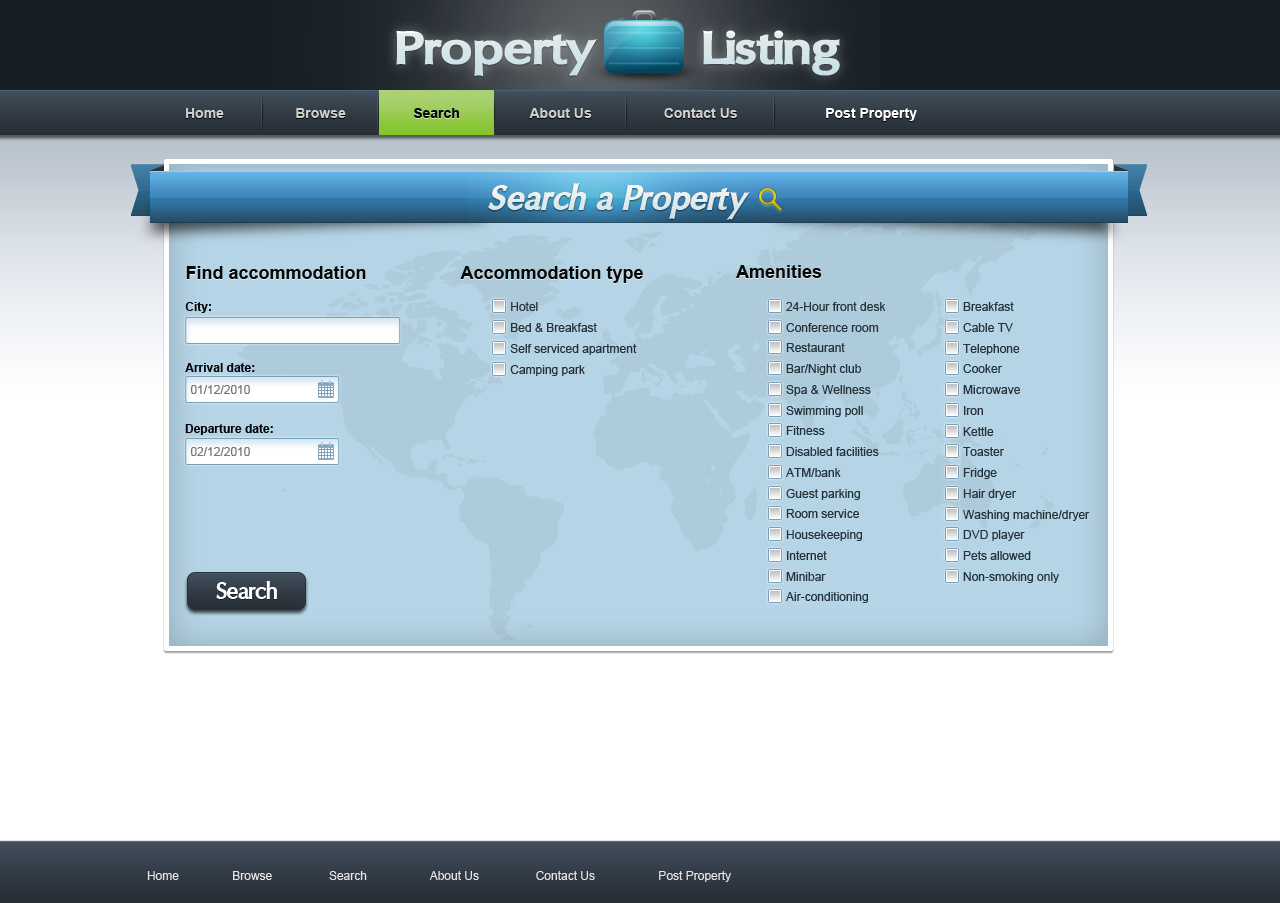
<style>
.page{position:relative;width:1280px;height:903px;background:#ffffff}
.page>*{position:absolute;margin:0}
.t1{font:48px "OregonLDOExtendedBlack";color:#d8e6ea}
.t2{font:14px "Arial-BoldMT";color:#cfcfcf}
.t3{font:14px "Arial-BoldMT";color:#070806}
.t4{font:14px "Arial-BoldMT";color:#ffffff}
.t5{font:36px "OregonLDOExtraBlack-Oblique";color:#e4ebeb}
.t6{font:18px "Arial-BoldMT";color:#070806}
.t7{font:12px "Arial-BoldMT";color:#010101}
.t8{font:12px "ArialMT";color:#26323a}
.t9{font:12px "ArialMT";color:#25323a}
.t10{font:12px "Arial-BoldMT";color:#000000}
.t11{font:12px "ArialMT";color:#787575}
.t12{font:24px "OregonLDOExtraBold";letter-spacing:-0.025em;color:#ffffff}
.t13{font:12px "ArialMT";color:#e5e4e4}
</style>
<div class="page">
<p class="t1" style="left:396px;top:30px;width:444px;height:46px">Property        Listing</p>
<p class="t2" style="left:186px;top:108px;width:38px;height:10px">Home</p>
<p class="t2" style="left:296px;top:108px;width:50px;height:10px">Browse</p>
<p class="t3" style="left:414px;top:108px;width:45px;height:10px">Search</p>
<p class="t2" style="left:529px;top:108px;width:63px;height:10px">About Us</p>
<p class="t2" style="left:664px;top:108px;width:73px;height:10px">Contact Us</p>
<p class="t4" style="left:826px;top:108px;width:91px;height:13px">Post Property</p>
<p class="t5" style="left:488px;top:183px;width:262px;height:37px">Search a Property</p>
<p class="t6" style="left:186px;top:266px;width:180px;height:13px">Find accommodation</p>
<p class="t6" style="left:460px;top:266px;width:183px;height:17px">Accommodation type</p>
<p class="t6" style="left:736px;top:265px;width:86px;height:13px">Amenities</p>
<p class="t7" style="left:185px;top:302px;width:26px;height:11px">City:</p>
<p class="t8" style="left:511px;top:302px;width:27px;height:9px">Hotel</p>
<p class="t9" style="left:786px;top:302px;width:100px;height:9px">24-Hour front desk</p>
<p class="t9" style="left:963px;top:302px;width:51px;height:9px">Breakfast</p>
<p class="t9" style="left:511px;top:323px;width:86px;height:9px">Bed &amp; Breakfast</p>
<p class="t9" style="left:786px;top:323px;width:93px;height:9px">Conference room</p>
<p class="t9" style="left:963px;top:323px;width:50px;height:9px">Cable TV</p>
<p class="t9" style="left:510px;top:344px;width:127px;height:11px">Self serviced apartment</p>
<p class="t9" style="left:786px;top:343px;width:59px;height:9px">Restaurant</p>
<p class="t9" style="left:963px;top:344px;width:57px;height:11px">Telephone</p>
<p class="t10" style="left:185px;top:363px;width:70px;height:9px">Arrival date:</p>
<p class="t9" style="left:510px;top:365px;width:75px;height:11px">Camping park</p>
<p class="t9" style="left:786px;top:364px;width:75px;height:11px">Bar/Night club</p>
<p class="t9" style="left:963px;top:364px;width:39px;height:9px">Cooker</p>
<p class="t11" style="left:190px;top:385px;width:60px;height:9px">01/12/2010</p>
<p class="t9" style="left:786px;top:385px;width:85px;height:11px">Spa &amp; Wellness</p>
<p class="t9" style="left:963px;top:385px;width:57px;height:9px">Microwave</p>
<p class="t9" style="left:786px;top:406px;width:77px;height:11px">Swimming poll</p>
<p class="t9" style="left:964px;top:406px;width:19px;height:9px">Iron</p>
<p class="t10" style="left:185px;top:424px;width:88px;height:11px">Departure date:</p>
<p class="t9" style="left:786px;top:426px;width:39px;height:9px">Fitness</p>
<p class="t9" style="left:963px;top:427px;width:31px;height:9px">Kettle</p>
<p class="t11" style="left:190px;top:447px;width:60px;height:9px">02/12/2010</p>
<p class="t9" style="left:786px;top:447px;width:93px;height:9px">Disabled facilities</p>
<p class="t9" style="left:963px;top:447px;width:41px;height:9px">Toaster</p>
<p class="t9" style="left:786px;top:468px;width:55px;height:9px">ATM/bank</p>
<p class="t9" style="left:963px;top:468px;width:34px;height:11px">Fridge</p>
<p class="t9" style="left:786px;top:489px;width:74px;height:11px">Guest parking</p>
<p class="t9" style="left:963px;top:489px;width:53px;height:11px">Hair dryer</p>
<p class="t9" style="left:786px;top:509px;width:73px;height:9px">Room service</p>
<p class="t9" style="left:963px;top:510px;width:127px;height:11px">Washing machine/dryer</p>
<p class="t9" style="left:786px;top:530px;width:76px;height:11px">Housekeeping</p>
<p class="t9" style="left:963px;top:530px;width:62px;height:11px">DVD player</p>
<p class="t9" style="left:787px;top:551px;width:40px;height:9px">Internet</p>
<p class="t9" style="left:963px;top:551px;width:68px;height:9px">Pets allowed</p>
<p class="t12" style="left:216px;top:581px;width:61px;height:18px">Search</p>
<p class="t9" style="left:786px;top:572px;width:40px;height:9px">Minibar</p>
<p class="t9" style="left:963px;top:572px;width:96px;height:11px">Non-smoking only</p>
<p class="t9" style="left:786px;top:592px;width:82px;height:11px">Air-conditioning</p>
<p class="t13" style="left:147px;top:871px;width:584px;height:11px">Home                Browse                 Search                   About Us                 Contact Us                   Post Property</p>
</div>
